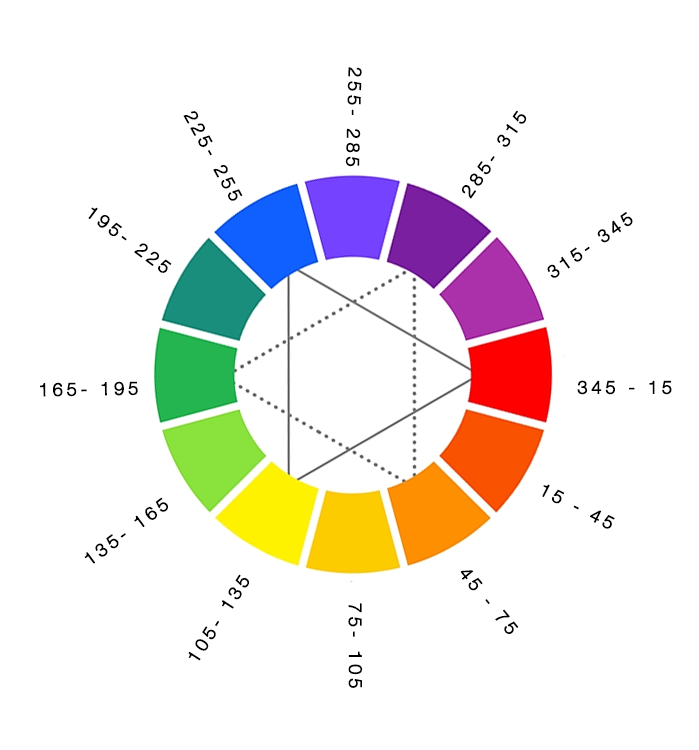
<style>
.page{position:relative;width:699px;height:750px;background:#ffffff}
.page>*{position:absolute;margin:0}
.t1{font:18px "HelveticaNeue-Light";letter-spacing:0.18em;color:#000000;font-weight:bold}
</style>
<div class="page">
<p class="t1" style="left:345px;top:67px;width:17px;height:100px;rotate:91deg">255- 285</p>
<p class="t1" style="left:183px;top:111px;width:60px;height:90px;rotate:61deg">225- 255</p>
<p class="t1" style="left:462px;top:110px;width:65px;height:89px;rotate:-55deg">285- 315</p>
<p class="t1" style="left:88px;top:207px;width:84px;height:66px;rotate:37deg">195- 225</p>
<p class="t1" style="left:547px;top:212px;width:86px;height:66px;rotate:-35deg">315- 345</p>
<p class="t1" style="left:40px;top:381px;width:98px;height:16px;rotate:-1deg">165- 195</p>
<p class="t1" style="left:577px;top:380px;width:95px;height:15px">345 - 15</p>
<p class="t1" style="left:542px;top:484px;width:73px;height:45px;rotate:27deg">15 - 45</p>
<p class="t1" style="left:84px;top:497px;width:84px;height:67px;rotate:-36deg">135- 165</p>
<p class="t1" style="left:188px;top:574px;width:61px;height:87px;rotate:-57deg">105- 135</p>
<p class="t1" style="left:460px;top:570px;width:59px;height:64px;rotate:51deg">45 - 75</p>
<p class="t1" style="left:348px;top:603px;width:15px;height:85px;rotate:90deg">75- 105</p>
</div>
